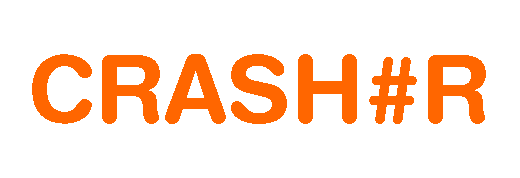
<style>
.page{position:relative;width:520px;height:178px;background:#ffffff}
.page>*{position:absolute;margin:0}
.t1{font:93.8px "HelveticaRoundedLTStd-Bd";color:#ff6600}
</style>
<div class="page">
<p class="t1" style="left:32px;top:54px;width:454px;height:70px">CRASH#R</p>
</div>
